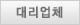
<style>
.page{position:relative;width:80px;height:25px}
.page>*{position:absolute;margin:0}
.t1{font:13px "YDIYGO130-KSCPC-EUC-H";color:#707070;font-weight:bold;scale:0.9 1}
</style>
<div class="page">
<p class="t1" style="left:16px;top:6px;width:47px;height:12px">대리업체</p>
</div>
